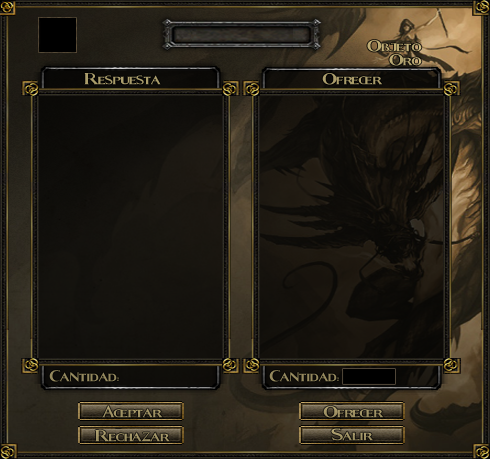
<style>
.page{position:relative;width:490px;height:459px}
.page>*{position:absolute;margin:0}
.t1{font:30px "Fleet-Street";color:#c9b779;scale:1.1 1}
.t2{font:30px "Fleet-Street";color:#aa9d6b;scale:1.1 1}
.t3{font:30px "Fleet-Street";color:#ab9d6b;scale:1.1 1}
.t4{font:30px "Fleet-Street";color:#94895e;scale:1.1 1}
.t5{font:30px "Fleet-Street";color:#95895e;scale:1.1 1}
.t6{font:30px "Fleet-Street";color:#a19366;scale:1.1 1}
.t7{font:30px "Fleet-Street";color:#a19365;scale:1.1 1}
.t8{font:30px "Fleet-Street";color:#a19466;scale:1.1 1}
.t9{font:30px "Fleet-Street";color:#a59768;scale:1.1 1}
</style>
<div class="page">
<p class="t1" style="left:367px;top:40px;width:55px;height:12px;opacity:0.82">Objeto</p>
<p class="t1" style="left:389px;top:54px;width:33px;height:12px;opacity:0.82">Oro</p>
<p class="t2" style="left:84px;top:73px;width:77px;height:12px">Respuesta</p>
<p class="t3" style="left:322px;top:73px;width:61px;height:12px">Ofrecer</p>
<p class="t4" style="left:49px;top:370px;width:70px;height:12px">Cantidad:</p>
<p class="t5" style="left:269px;top:370px;width:70px;height:12px">Cantidad:</p>
<p class="t6" style="left:102px;top:405px;width:61px;height:13px">Aceptar</p>
<p class="t7" style="left:323px;top:406px;width:61px;height:12px">Ofrecer</p>
<p class="t8" style="left:95px;top:430px;width:75px;height:12px">Rechazar</p>
<p class="t9" style="left:331px;top:428px;width:42px;height:13px">Salir</p>
</div>
